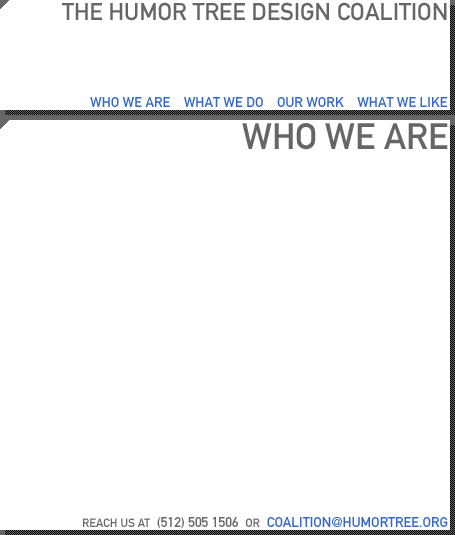
<style>
.page{position:relative;width:455px;height:535px;background:#ffffff}
.page>*{position:absolute;margin:0}
.t1{font:24px "DINMittelschrift";color:#666666}
.t2{font:14px "DINMittelschrift";color:#3366cc}
.t3{font:36px "DINMittelschrift";color:#666666}
</style>
<div class="page">
<p class="t1" style="left:62px;top:2px;width:385px;height:19px">THE HUMOR TREE DESIGN COALITION</p>
<p class="t2" style="left:90px;top:97px;width:357px;height:10px">WHO WE ARE    WHAT WE DO    OUR WORK    WHAT WE LIKE</p>
<p class="t3" style="left:242px;top:123px;width:206px;height:27px">WHO WE ARE</p>
</div>
